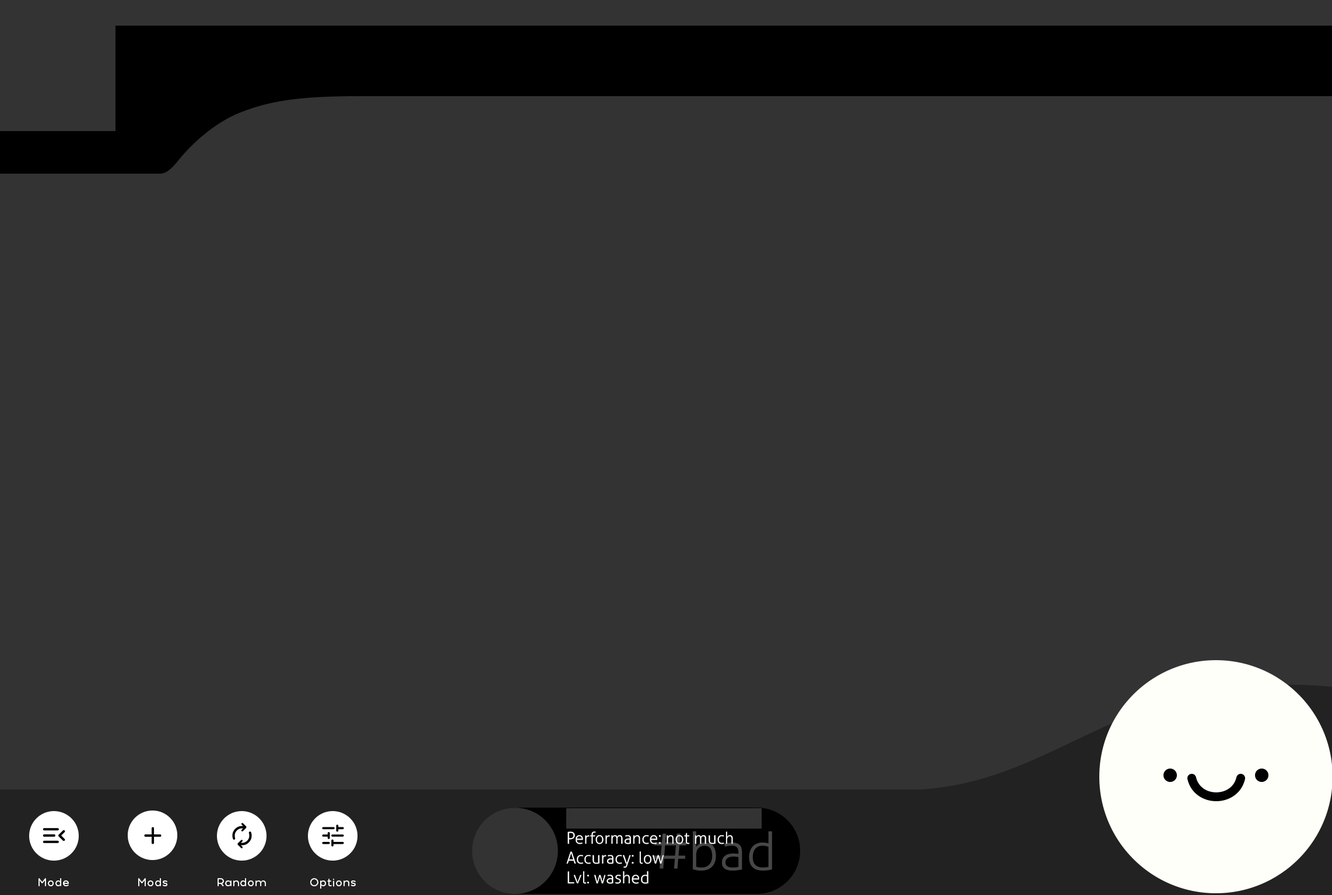
<style>
.page{position:relative;width:1332px;height:895px;background:#333333}
.page>*{position:absolute;margin:0}
.t1{font:16.3px "Aller-Light";color:#ffffff}
.t2{font:52.5px "Aller-Light";color:#474747}
.t3{font:11.7px "PollyRounded-Regular";color:#ffffff}
</style>
<div class="page">
<p class="t1" style="left:566px;top:832px;width:167px;height:52px">Performance: not much<br>Accuracy: low<br>Lvl: washed</p>
<p class="t2" style="left:653px;top:831px;width:119px;height:40px">#bad</p>
<p class="t3" style="left:38px;top:879px;width:31px;height:8px">Mode</p>
<p class="t3" style="left:138px;top:879px;width:29px;height:8px">Mods</p>
<p class="t3" style="left:217px;top:879px;width:49px;height:8px">Random</p>
<p class="t3" style="left:310px;top:879px;width:46px;height:11px">Options</p>
</div>
